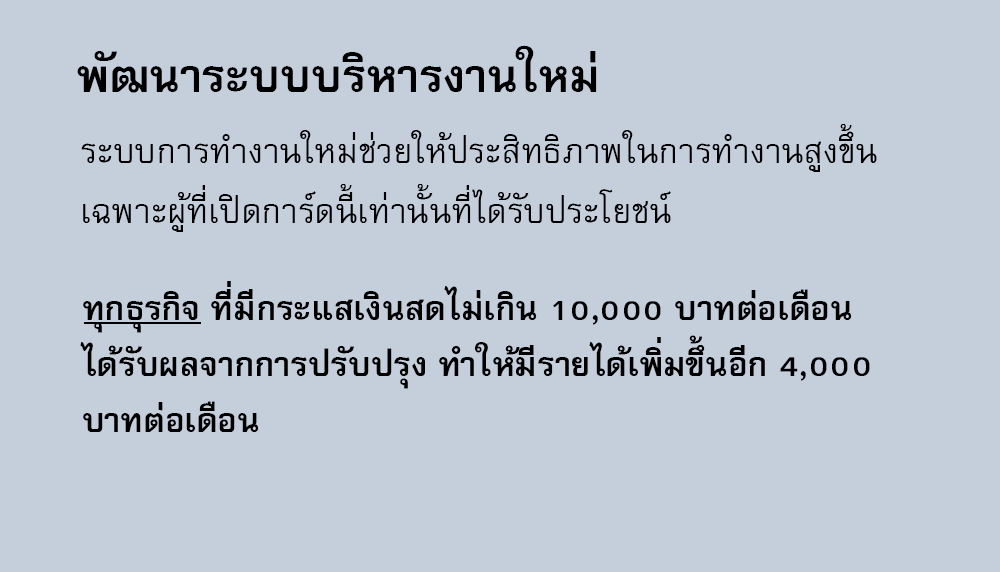
<style>
.page{position:relative;width:1000px;height:572px;background:#c5cedb}
.page>*{position:absolute;margin:0}
.t1{font:64px "FreesiaUPCBold";color:#000000}
.t2{font:48px/60px "FreesiaUPC";color:#000000}
.t3{font:47px "FreesiaUPCBold";color:#000000}
</style>
<div class="page">
<p class="t1" style="left:77px;top:45px;width:520px;height:48px">พัฒนาระบบบริหารงานใหม่</p>
<p class="t2" style="left:81px;top:124px;width:796px;height:108px">ระบบการทำงานใหม่ช่วยให้ประสิทธิภาพในการทำงานสูงขึ้น<br>เฉพาะผู้ที่เปิดการ์ดนี้เท่านั้นที่ได้รับประโยชน์</p>
<p class="t3" style="left:80px;top:281px;width:790px;height:151px">ทุกธุรกิจ ที่มีกระแสเงินสดไม่เกิน 10,000 บาทต่อเดือน<br>ได้รับผลจากการปรับปรุง ทำให้มีรายได้เพิ่มขึ้นอีก 4,000<br>บาทต่อเดือน</p>
</div>
